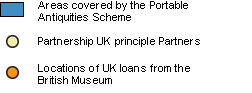
<style>
.page{position:relative;width:252px;height:93px;background:#ffffff}
.page>*{position:absolute;margin:0}
.t1{font:11px/12px "ArialMT";letter-spacing:0.01em;color:#000000}
.t2{font:11px "ArialMT";letter-spacing:0.01em;color:#000000}
</style>
<div class="page">
<p class="t1" style="left:38px;top:1px;width:150px;height:22px">Areas covered by the Portable <br>Antiquities Scheme</p>
<p class="t2" style="left:38px;top:37px;width:162px;height:10px">Partnership UK principle Partners</p>
<p class="t1" style="left:38px;top:64px;width:152px;height:20px">Locations of UK loans from the <br>British Museum</p>
</div>
